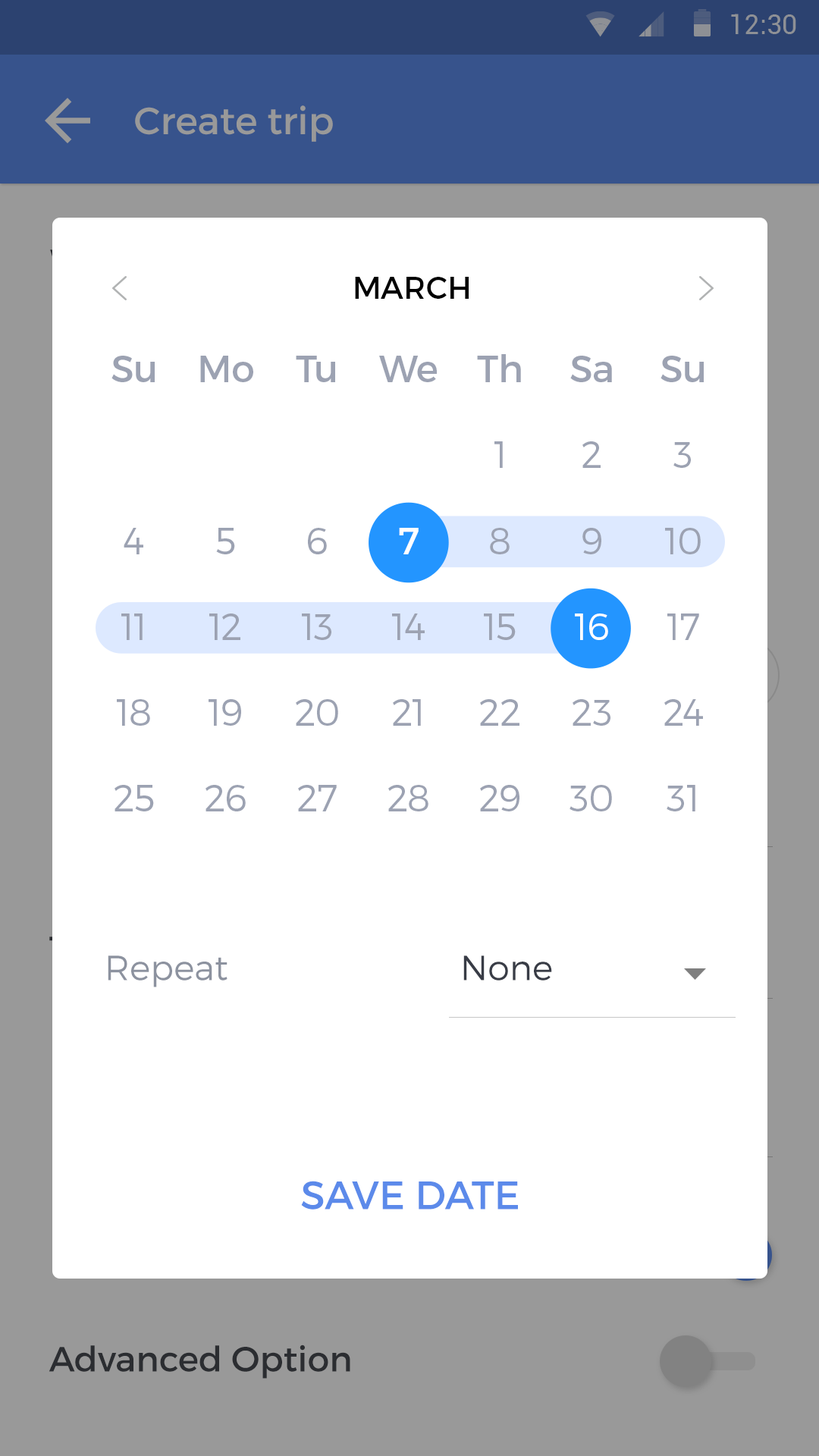
<style>
.page{position:relative;width:819px;height:1456px;background:#ffffff}
.page>*{position:absolute;margin:0}
.t1{font:30.8px "Montserrat-Regular";color:#000000}
.t2{font:37.2px/85.8px "Montserrat-Light";color:#9ca2b2}
.t3{font:37.2px/85.8px "Montserrat-Regular";color:#9ca2b2}
.t4{font:37.2px/85.8px "Montserrat-Regular";color:#ffffff}
.t5{font:37.2px/85.8px "Montserrat-Light";color:#ffffff}
.t6{font:34.9px "Montserrat-Light";color:#8c929f}
.t7{font:34.9px "Montserrat-Light";color:#383c46}
.t8{font:39.4px "Montserrat-Regular";color:#5c8aea;text-transform:uppercase}
</style>
<div class="page">
<p class="t1" style="left:355px;top:277px;width:114px;height:22px">MARCH</p>
<p class="t2" style="left:111px;top:356px;width:44px;height:455px;text-align:center"><span class="t3">Su<br><br></span>4<br>11<br>18<br>25</p>
<p class="t2" style="left:200px;top:356px;width:53px;height:455px;text-align:center"><span class="t3">Mo<br><br></span>5<br>12<br>19<br>26</p>
<p class="t2" style="left:296px;top:356px;width:42px;height:455px;text-align:center"><span class="t3">Tu<br><br></span>6<br>13<br>20<br>27</p>
<p class="t2" style="left:379px;top:356px;width:58px;height:455px;text-align:center"><span class="t3">We<br><br></span><span class="t4">7<br></span>14<br>21<br>28</p>
<p class="t2" style="left:477px;top:354px;width:44px;height:457px;text-align:center"><span class="t3">Th<br></span>1<br>8<br>15<br>22<br>29</p>
<p class="t2" style="left:570px;top:356px;width:42px;height:455px;text-align:center"><span class="t3">Sa<br></span>2<br>9<br><span class="t5">16<br></span>23<br>30</p>
<p class="t2" style="left:660px;top:356px;width:44px;height:455px;text-align:center"><span class="t3">Su<br></span>3<br>10<br>17<br>24<br>31</p>
<p class="t6" style="left:108px;top:955px;width:119px;height:32px">Repeat</p>
<p class="t7" style="left:463px;top:955px;width:89px;height:26px">None</p>
<p class="t8" style="left:301px;top:1181px;width:217px;height:29px">SAVE DATE</p>
</div>
